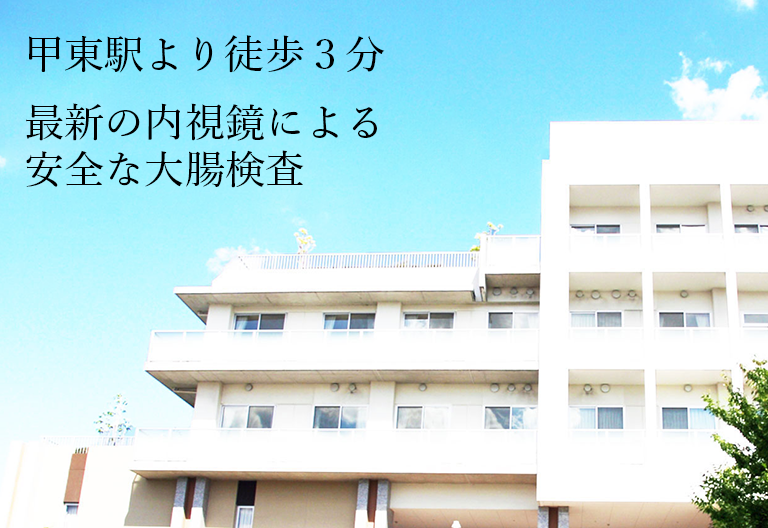
<style>
.page{position:relative;width:768px;height:528px}
.page>*{position:absolute;margin:0}
.t1{font:39.8px "YuMin-Medium";color:#000000}
.t2{font:39.8px/47.7px "YuMin-Medium";color:#000000}
</style>
<div class="page">
<p class="t1" style="left:29px;top:35px;width:356px;height:38px">甲東駅より徒歩３分</p>
<p class="t2" style="left:26px;top:103px;width:351px;height:85px">最新の内視鏡による<br>安全な大腸検査</p>
</div>
